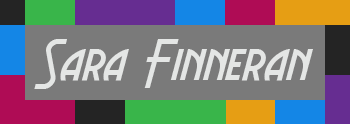
<style>
.page{position:relative;width:350px;height:124px;background:#7a7a7a}
.page>*{position:absolute;margin:0}
.t1{font:60px "AeroviasBrasilNF";color:#e4e6e5}
</style>
<div class="page">
<p class="t1" style="left:34px;top:39px;width:279px;height:50px">Sara Finneran</p>
</div>
